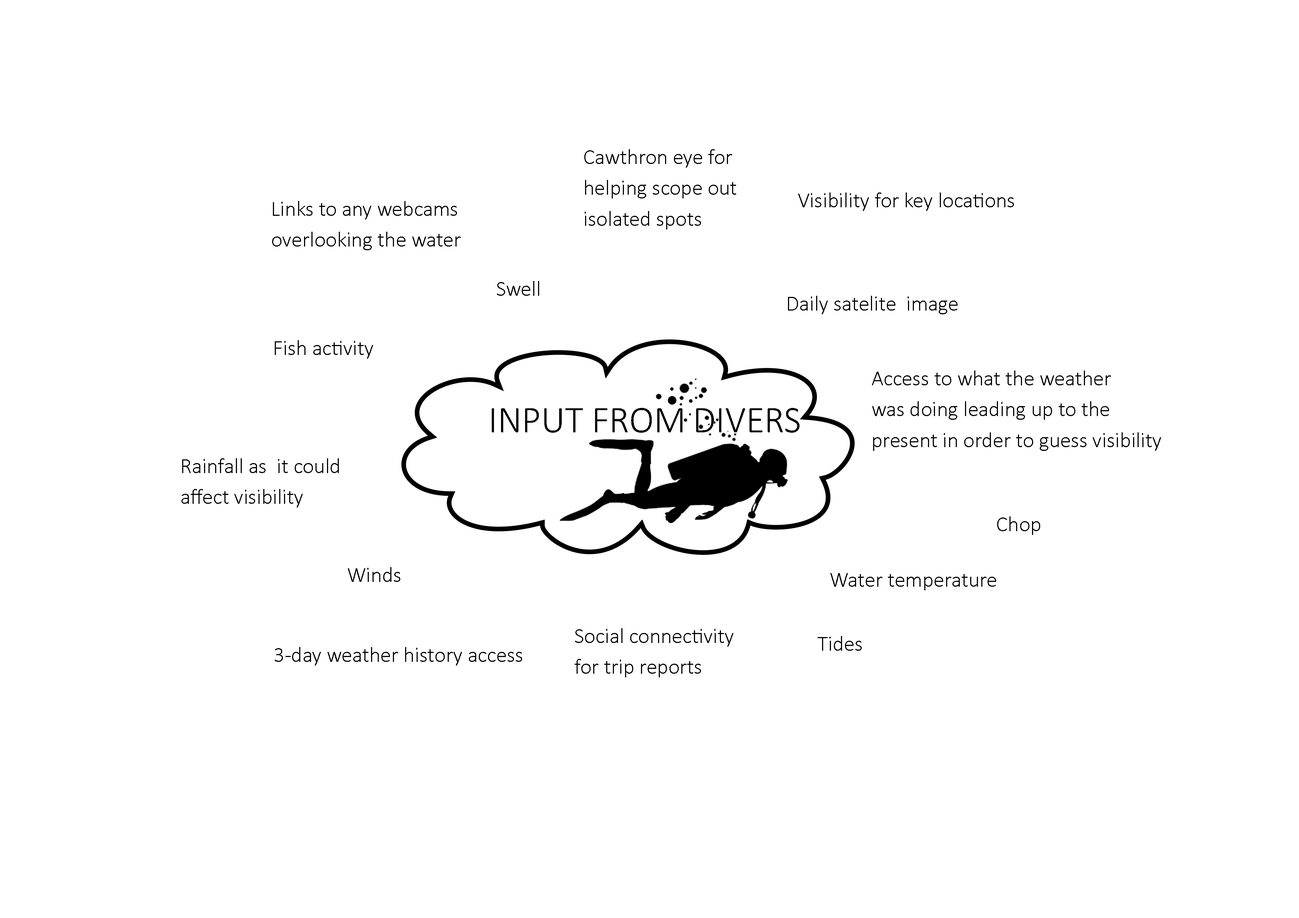
<style>
.page{position:relative;width:1299px;height:918px;background:#ffffff}
.page>*{position:absolute;margin:0}
.t1{font:21.6px/15.4px "Calibri-Light";color:#000000}
.t2{font:21.6px "Calibri-Light";color:#000000}
.t3{font:38.2px "Calibri-Light";color:#000000}
</style>
<div class="page">
<p class="t1" style="left:584px;top:149px;width:152px;height:81px">Cawthron eye for<br><br>helping scope out <br><br>isolated spots</p>
<p class="t2" style="left:798px;top:193px;width:216px;height:18px">Visibility for key locations</p>
<p class="t1" style="left:272px;top:201px;width:189px;height:49px">Links to any webcams <br><br>overlooking the water</p>
<p class="t2" style="left:497px;top:281px;width:42px;height:15px">Swell</p>
<p class="t2" style="left:788px;top:296px;width:169px;height:18px">Daily satelite  image</p>
<p class="t2" style="left:275px;top:340px;width:98px;height:19px">Fish activity</p>
<p class="t1" style="left:872px;top:371px;width:289px;height:80px">Access to what the weather<br><br>was doing leading up to the<br><br>present in order to guess visibility</p>
<p class="t3" style="left:492px;top:408px;width:307px;height:25px">INPUT FROM DIVERS</p>
<p class="t1" style="left:181px;top:458px;width:158px;height:50px">Rainfall as  it could<br><br>affect visibility</p>
<p class="t2" style="left:997px;top:516px;width:43px;height:19px">Chop</p>
<p class="t2" style="left:348px;top:567px;width:52px;height:15px">Winds</p>
<p class="t2" style="left:830px;top:573px;width:166px;height:18px">Water temperature</p>
<p class="t1" style="left:575px;top:628px;width:158px;height:50px">Social connectivity<br><br>for trip reports</p>
<p class="t2" style="left:817px;top:636px;width:45px;height:15px">Tides</p>
<p class="t2" style="left:275px;top:647px;width:247px;height:19px">3-day weather history access</p>
</div>
